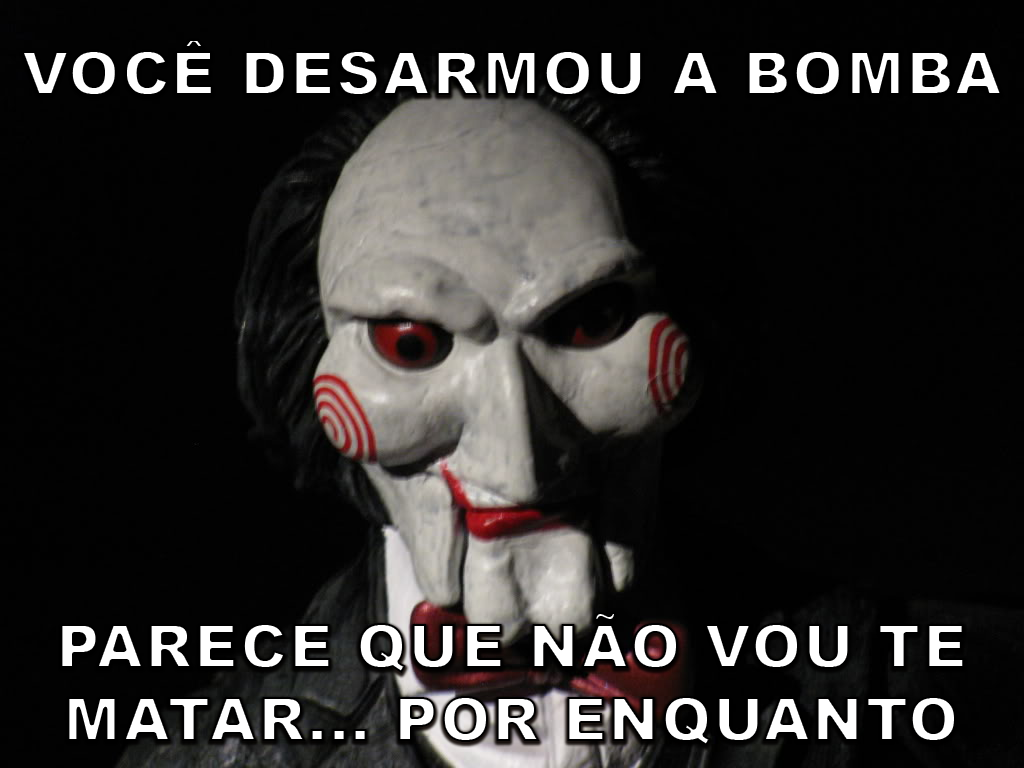
<style>
.page{position:relative;width:1024px;height:768px;background:#020202}
.page>*{position:absolute;margin:0}
.t1{font:62px "Arial-Black";letter-spacing:0.025em;color:#ffffff}
.t2{font:61px "Arial-Black";letter-spacing:0.025em;color:#ffffff}
</style>
<div class="page">
<p class="t1" style="left:21px;top:39px;width:982px;height:57px">VOCÊ DESARMOU A BOMBA</p>
<p class="t2" style="left:60px;top:612px;width:905px;height:134px;text-align:center">PARECE QUE NÃO VOU TE<br>MATAR... POR ENQUANTO</p>
</div>
